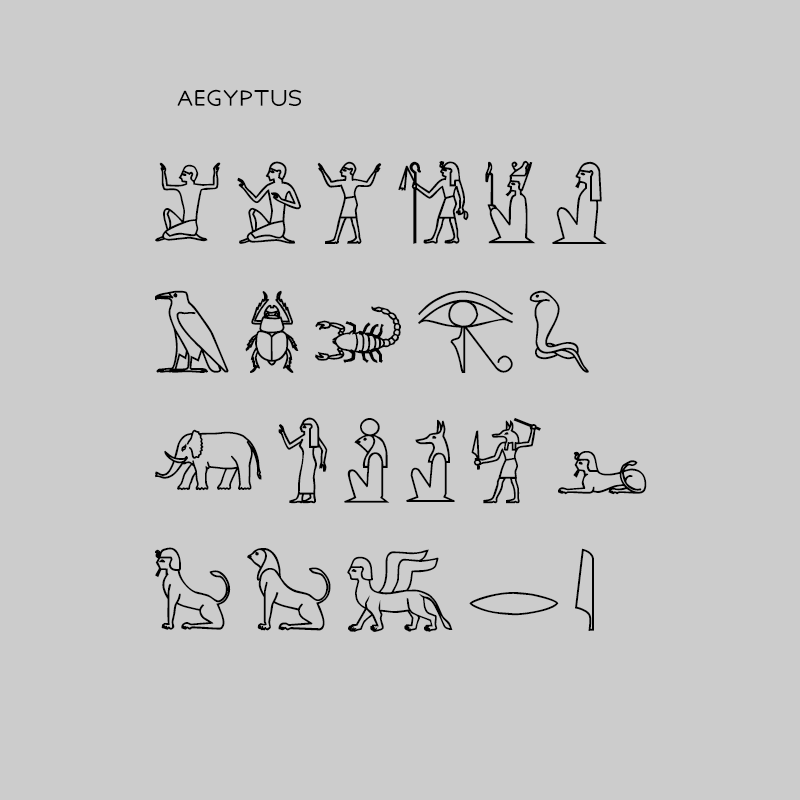
<style>
.page{position:relative;width:800px;height:800px;background:#cccccc}
.page>*{position:absolute;margin:0}
.t1{font:33px "Aegyptus";color:#000000}
.t2{font:89px/119px "AegyptusBold";letter-spacing:0.1em;color:#000000}
</style>
<div class="page">
<p class="t1" style="left:177px;top:89px;width:125px;height:17px">aegyptus</p>
<p class="t2" style="left:155px;top:160px;width:492px;height:472px">𓁏𓀀𓀠󳁣𓁵󳂘 <br>𓄿𓆣󳻗𓂀𓆗<br>𓃰󳏛󳐐𓁢󳒞󳦢<br>󳦲󳦳󳩅𓂋𓇋</p>
</div>
